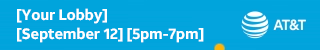
<style>
.page{position:relative;width:320px;height:50px;background:#03a4dd}
.page>*{position:absolute;margin:0}
.t1{font:15px/19px "ATTAleckSans_Bold";letter-spacing:-0.014em;color:#ffffff}
</style>
<div class="page">
<p class="t1" style="left:17px;top:8px;width:187px;height:35px">[Your Lobby]<br>[September 12] [5pm-7pm]</p>
</div>
